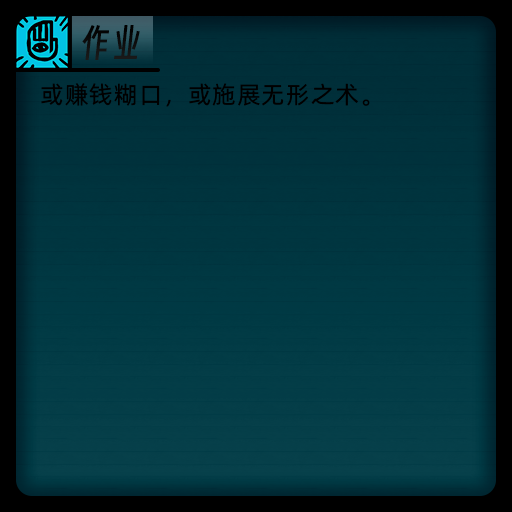
<style>
.page{position:relative;width:512px;height:512px}
.page>*{position:absolute;margin:0}
.t1{font:36px "SmileySans-Oblique";letter-spacing:0.04em;color:#000000}
.t2{font:24px "AlibabaPuHuiTiR";letter-spacing:0.04em;color:#000000}
</style>
<div class="page">
<p class="t1" style="left:82px;top:25px;width:58px;height:35px">作业</p>
<p class="t2" style="left:41px;top:83px;width:329px;height:24px">或赚钱糊口，或施展无形之术。</p>
</div>
